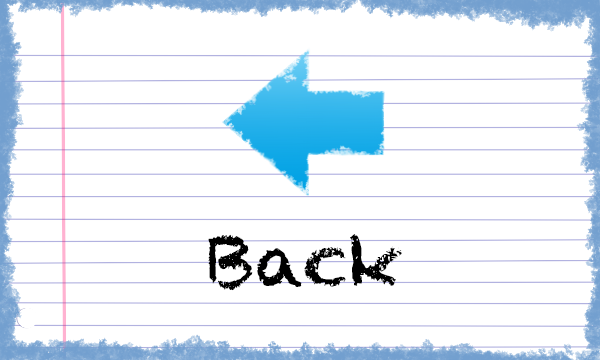
<style>
.page{position:relative;width:600px;height:360px;background:#ffffff}
.page>*{position:absolute;margin:0}
.t1{font:72px "Chalkduster";color:#000000}
</style>
<div class="page">
<p class="t1" style="left:208px;top:234px;width:194px;height:57px">Back</p>
</div>
